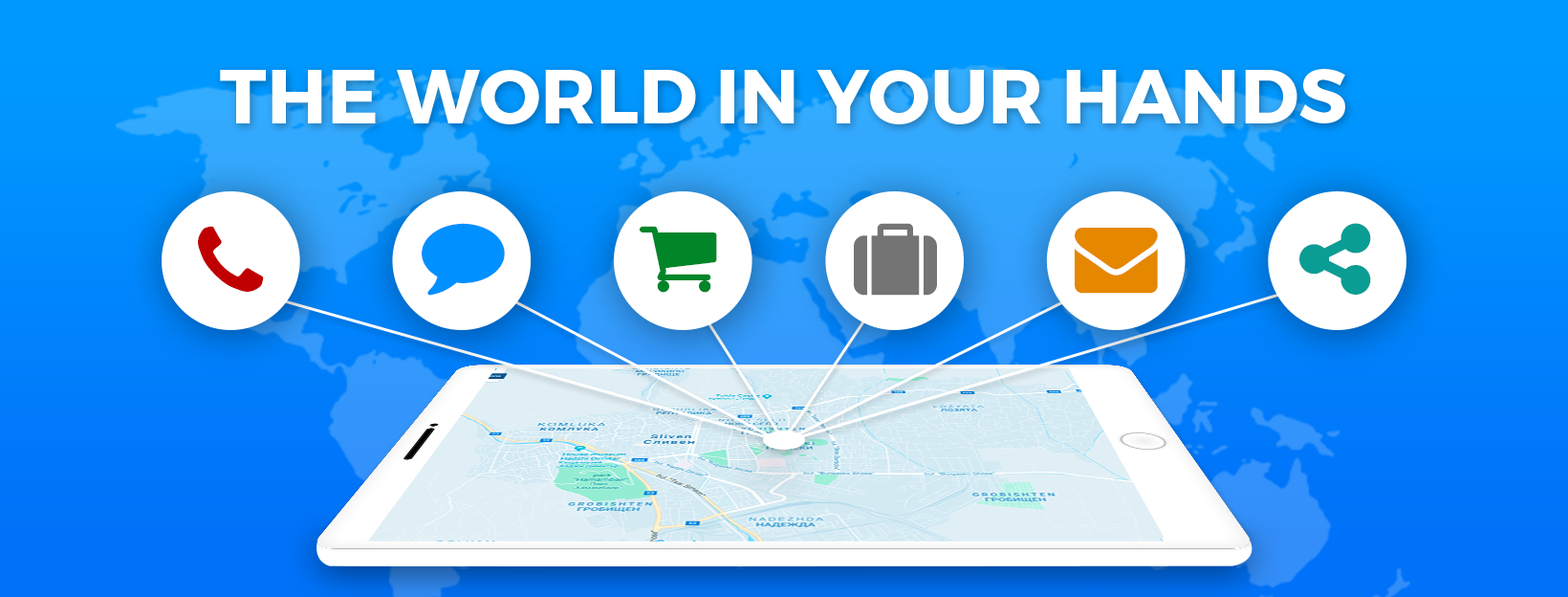
<style>
.page{position:relative;width:1568px;height:597px}
.page>*{position:absolute;margin:0}
.t1{font:76.5px "Montserrat-Bold";color:#ffffff;text-transform:uppercase}
</style>
<div class="page">
<p class="t1" style="left:220px;top:69px;width:1125px;height:55px">The world in your hands</p>
</div>
